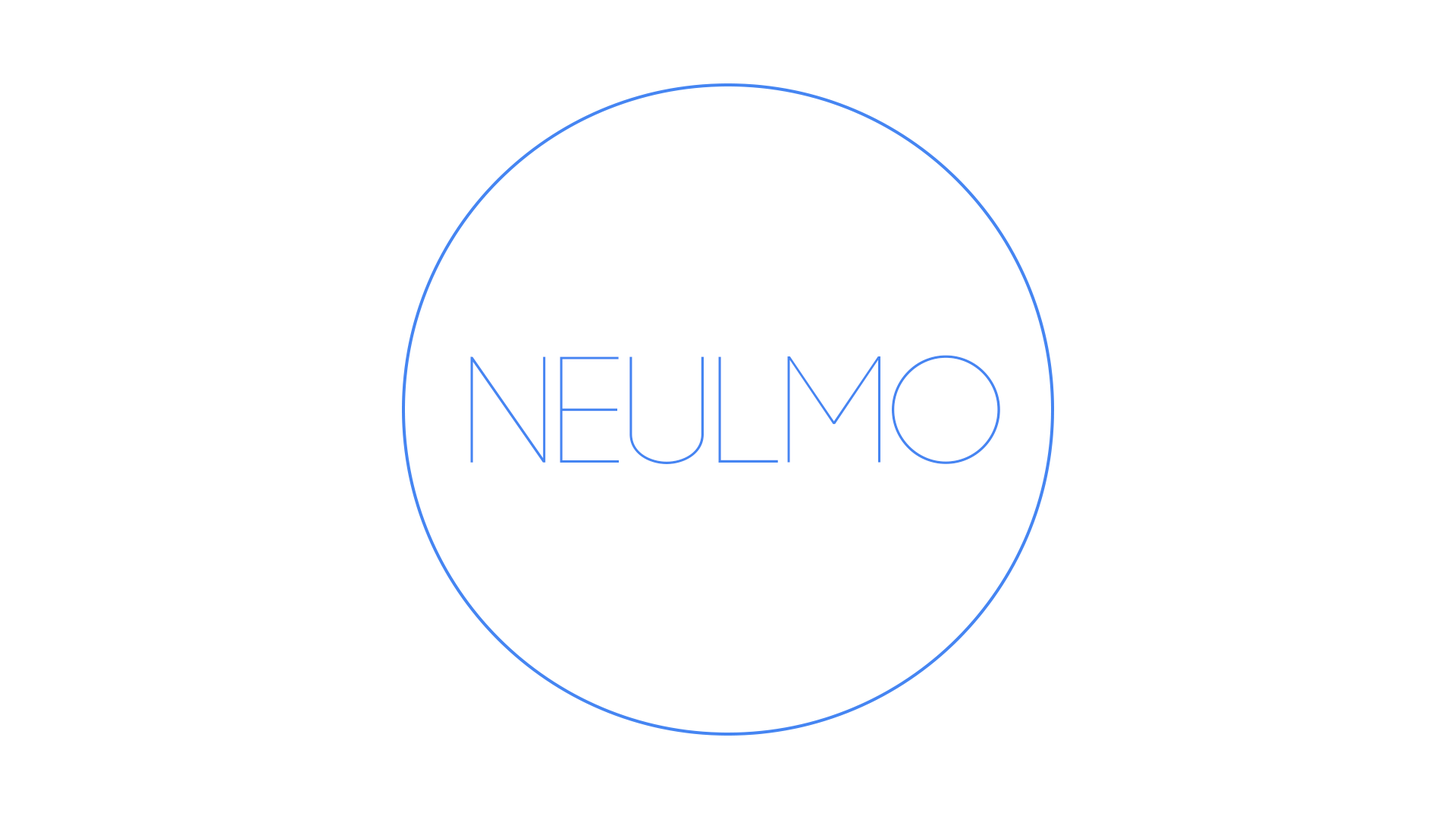
<style>
.page{position:relative;width:1456px;height:819px;background:#ffffff}
.page>*{position:absolute;margin:0}
.t1{font:151.7px "Code-Light";color:#4585f2}
</style>
<div class="page">
<p class="t1" style="left:470px;top:355px;width:530px;height:109px">neulmo</p>
</div>
